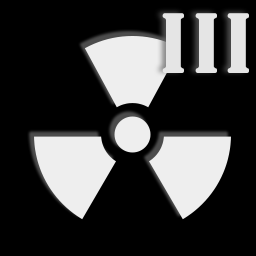
<style>
.page{position:relative;width:256px;height:256px;background:#000000}
.page>*{position:absolute;margin:0}
.t1{font:80px "StencilStd";letter-spacing:0.1em;color:#e5e5e5;scale:0.75 1}
</style>
<div class="page">
<p class="t1" style="left:162px;top:13px;width:87px;height:60px">III</p>
</div>
